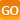
<style>
.page{position:relative;width:20px;height:20px}
.page>*{position:absolute;margin:0}
.t1{font:14px "Calibri-Bold";letter-spacing:-0.05em;color:#ffffff}
</style>
<div class="page">
<p class="t1" style="left:1px;top:6px;width:18px;height:9px">GO</p>
</div>
